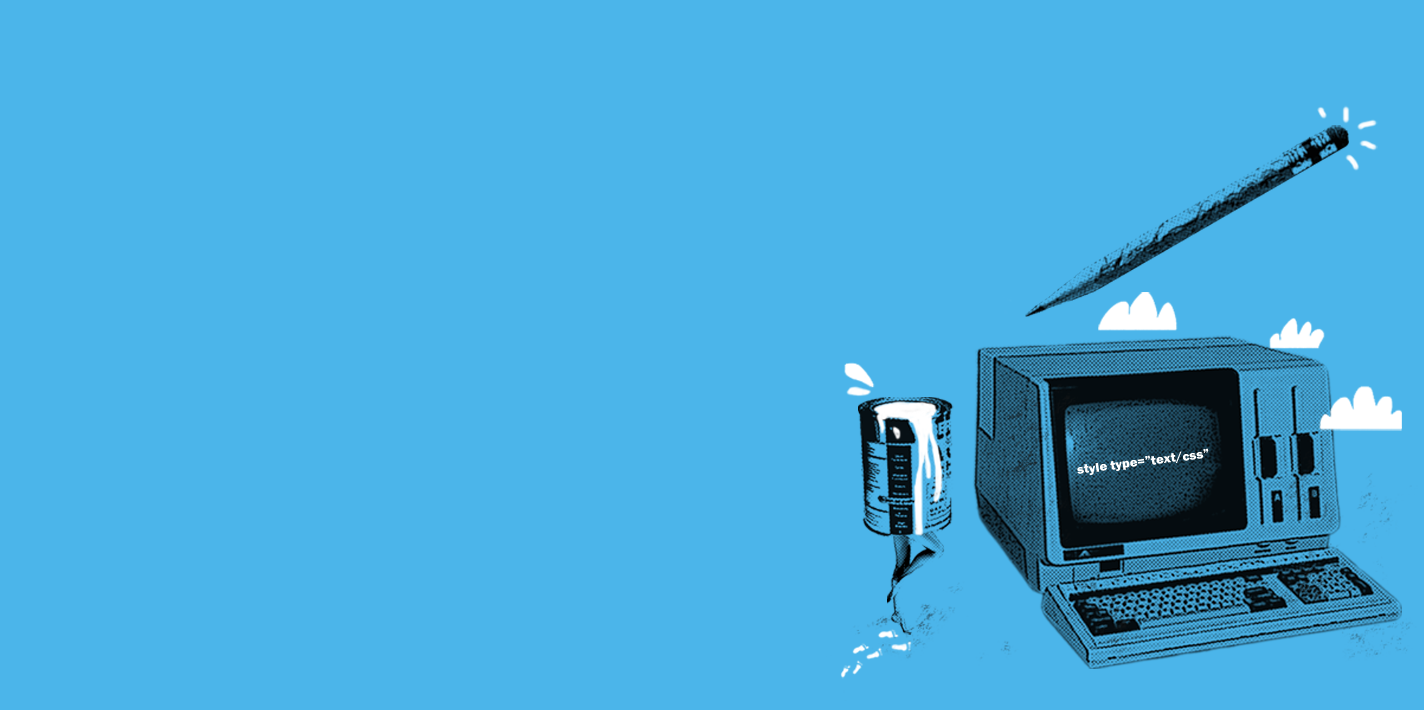
<style>
.page{position:relative;width:1424px;height:710px;background:#4bb5ea}
.page>*{position:absolute;margin:0}
.t1{font:13.2px "FranklinGothic-Heavy";color:#ffffff}
</style>
<div class="page">
<p class="t1" style="left:1077px;top:448px;width:132px;height:27px;rotate:-7deg">style type=”text/css”</p>
</div>
